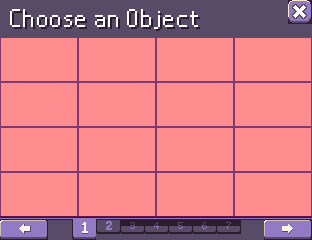
<style>
.page{position:relative;width:312px;height:240px;background:#ff8c8f}
.page>*{position:absolute;margin:0}
.t1{font:32px "Nintendo-DS-BIOS";letter-spacing:0.04em;color:#ffffff}
.t2{font:32px "Nintendo-DS-BIOS";letter-spacing:0.04em;color:#2d1b2e}
.t3{font:10px "Bitsy";letter-spacing:0.04em;color:#574b67}
.t4{font:10px "Bitsy";letter-spacing:0.04em}
</style>
<div class="page">
<p class="t1" style="left:10px;top:9px;width:188px;height:20px">Choose an Object</p>
<p class="t2" style="left:12px;top:11px;width:188px;height:20px">Choose an Object</p>
<p class="t3" style="left:130px;top:222px;width:5px;height:7px">3</p>
<p class="t4" style="left:130px;top:222px;width:5px;height:7px">3</p>
<p class="t4" style="left:154px;top:222px;width:5px;height:7px">4</p>
<p class="t4" style="left:154px;top:222px;width:5px;height:7px">4</p>
<p class="t3" style="left:178px;top:222px;width:5px;height:7px">5</p>
<p class="t4" style="left:178px;top:222px;width:5px;height:7px">5</p>
<p class="t4" style="left:202px;top:222px;width:5px;height:7px">6</p>
<p class="t4" style="left:202px;top:222px;width:5px;height:7px">6</p>
<p class="t3" style="left:226px;top:222px;width:5px;height:7px">7</p>
<p class="t3" style="left:226px;top:222px;width:5px;height:7px">7</p>
</div>
